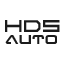
<style>
.page{position:relative;width:64px;height:64px;background:#ffffff}
.page>*{position:absolute;margin:0}
.t1{font:19px "AbsoluteZero";color:#1b1b1b}
.t2{font:19px "4114Blaster";color:#1b1b1b}
</style>
<div class="page">
<p class="t1" style="left:5px;top:20px;width:55px;height:12px">HDS</p>
<p class="t2" style="left:5px;top:35px;width:52px;height:9px">AUTO</p>
</div>
